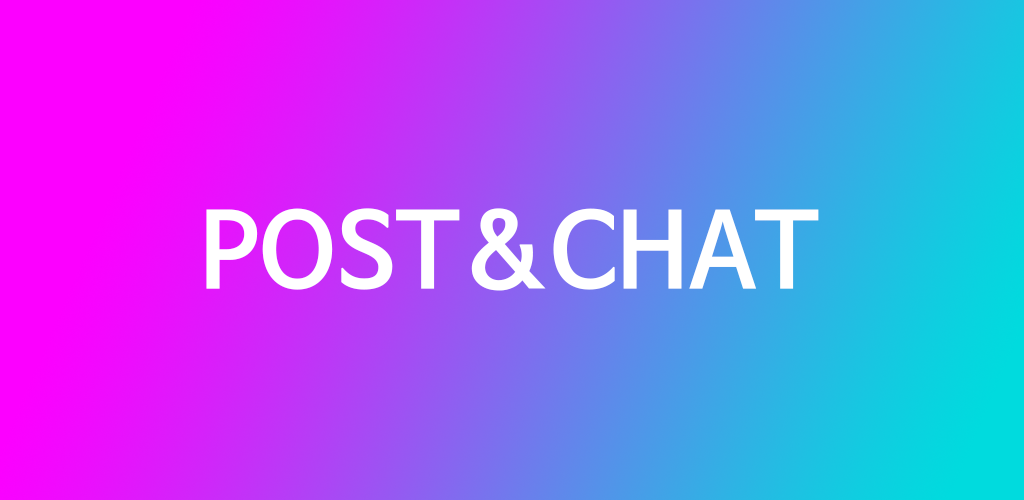
<style>
.page{position:relative;width:1024px;height:500px}
.page>*{position:absolute;margin:0}
.t1{font:102.2px "NanumBarunGothicOTFBold";color:#ffffff}
</style>
<div class="page">
<p class="t1" style="left:206px;top:208px;width:613px;height:83px">POST&amp;CHAT</p>
</div>
